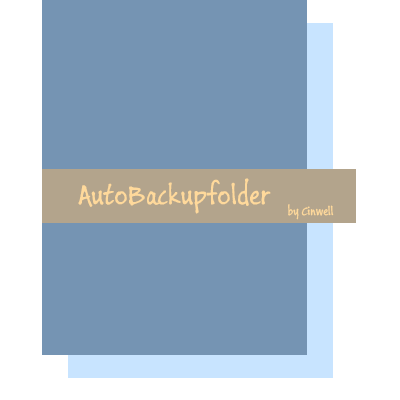
<style>
.page{position:relative;width:400px;height:400px;background:#7594b3}
.page>*{position:absolute;margin:0}
.t1{font:30px "BuxtonSketch";color:#ffd99b}
.t2{font:13px "BuxtonSketch";color:#ffd99b}
</style>
<div class="page">
<p class="t1" style="left:78px;top:178px;width:193px;height:36px">AutoBackupfolder</p>
<p class="t2" style="left:288px;top:204px;width:46px;height:16px">by Cinwell</p>
</div>
